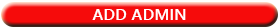
<style>
.page{position:relative;width:280px;height:28px;background:#f60b0b}
.page>*{position:absolute;margin:0}
.t1{font:16.4px "YuGothicUI-Bold";color:#ffffff}
</style>
<div class="page">
<p class="t1" style="left:92px;top:9px;width:94px;height:11px">ADD ADMIN</p>
</div>
